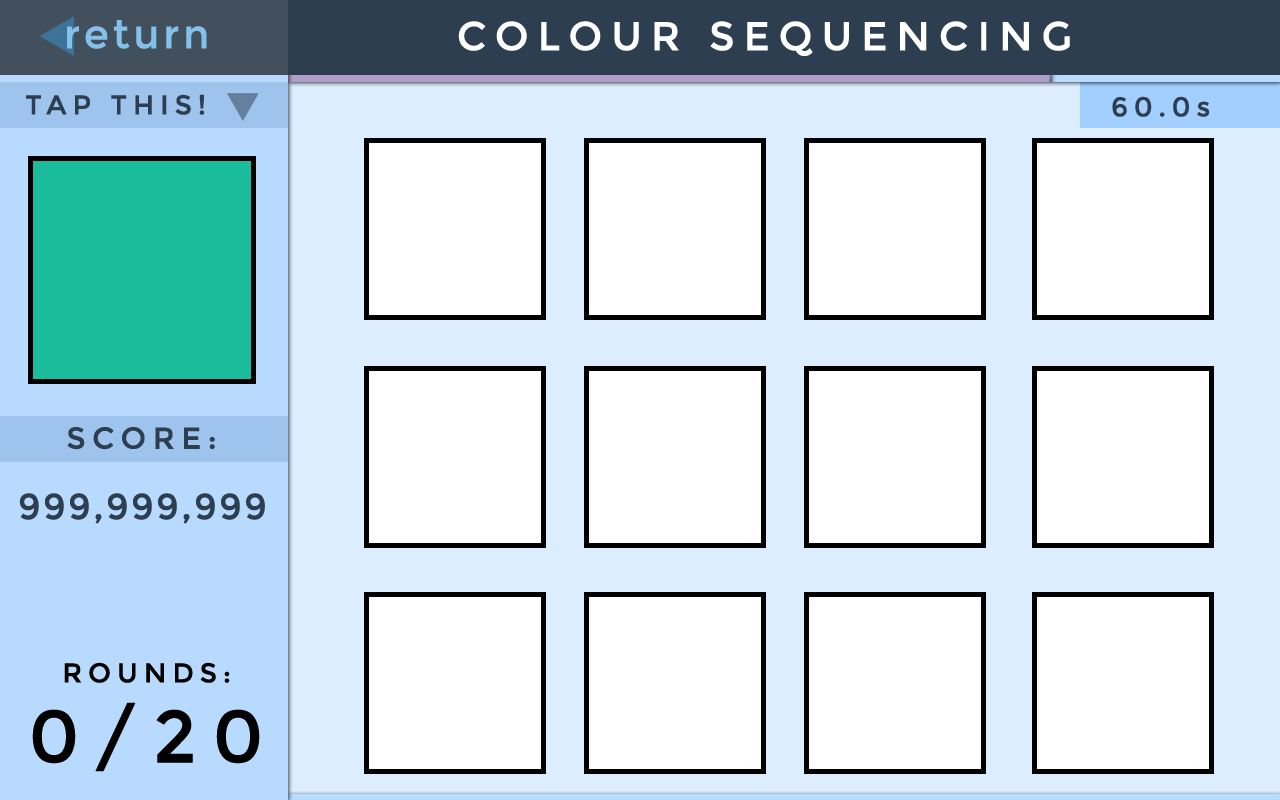
<style>
.page{position:relative;width:1280px;height:800px;background:#ffffff}
.page>*{position:absolute;margin:0}
.t1{font:40px "Montserrat-Regular";letter-spacing:0.075em;color:#83c1eb;font-weight:bold}
.t2{font:40px "Montserrat-Regular";letter-spacing:0.2em;color:#ffffff;text-transform:uppercase;font-weight:bold}
.t3{font:27px "Montserrat-Regular";letter-spacing:0.2em;color:#2d3e50;text-transform:uppercase;font-weight:bold}
.t4{font:27px "Montserrat-Regular";letter-spacing:0.2em;color:#2d3e50;font-weight:bold}
.t5{font:30px "Montserrat-Regular";letter-spacing:0.2em;color:#2d3e50;font-weight:bold}
.t6{font:36px "Montserrat-Regular";letter-spacing:0.05em;color:#2d3e50;font-weight:bold}
.t7{font:27px/30.9px "Montserrat-Regular";letter-spacing:0.2em;color:#000000;text-transform:uppercase;font-weight:bold}
.t8{font:73px/79.9px "Montserrat-Regular";letter-spacing:0.2em;color:#000000;text-transform:uppercase;font-weight:bold}
</style>
<div class="page">
<p class="t1" style="left:67px;top:20px;width:140px;height:29px">return</p>
<p class="t2" style="left:458px;top:21px;width:612px;height:35px">Colour Sequencing</p>
<p class="t3" style="left:26px;top:94px;width:179px;height:21px">Tap This!</p>
<p class="t3" style="left:1112px;top:96px;width:98px;height:21px">60.0<span class="t4">s</span></p>
<p class="t5" style="left:67px;top:427px;width:148px;height:23px">SCORE:</p>
<p class="t6" style="left:19px;top:493px;width:246px;height:31px">999,999,999</p>
<p class="t7" style="left:32px;top:662px;width:228px;height:110px;text-align:center">Rounds:<br><span class="t8">0/20</span></p>
</div>
